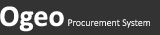
<style>
.page{position:relative;width:160px;height:35px;background:#333333}
.page>*{position:absolute;margin:0}
.t1{font:10px "Calibri-Light";color:#ffffff}
.t2{font:30px "Calibri-Bold";color:#ffffff}
</style>
<div class="page">
<p class="t1" style="left:0px;top:6px;width:150px;height:26px"><span class="t2">Ogeo </span>Procurement System</p>
</div>
